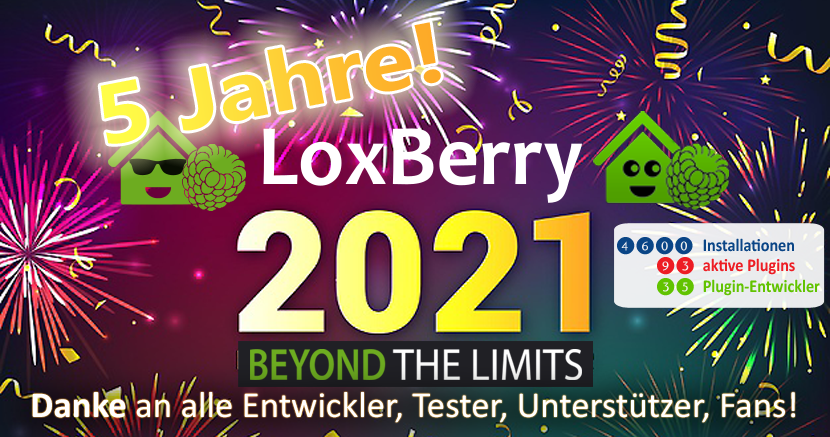
<style>
.page{position:relative;width:830px;height:437px}
.page>*{position:absolute;margin:0}
.t1{font:84.8px "SegoeUI-Bold";scale:1.13 1}
.t2{font:27px "BulletNumbersW90-SansPos";color:#0a4586}
.t3{font:18px "Calibri-Bold";color:#0a4586;scale:0.9 1}
.t4{font:27px "BulletNumbersW90-SansPos";color:#ed1d24}
.t5{font:18px "Calibri-Bold";color:#ed1d24;scale:0.9 1}
.t6{font:27px "BulletNumbersW90-SansPos";color:#61c300}
.t7{font:18px "Calibri-Bold";color:#61c300;scale:0.9 1}
.t8{font:36.8px "Calibri";color:#ffffff}
.t9{font:36.8px "Calibri-Bold";color:#ffffff}
</style>
<div class="page">
<p class="t1" style="left:100px;top:22px;width:341px;height:122px;rotate:-11deg">5 Jahre!</p>
<p class="t2" style="left:617px;top:237px;width:76px;height:18px">4600</p>
<p class="t3" style="left:703px;top:238px;width:91px;height:14px">Installationen</p>
<p class="t4" style="left:657px;top:257px;width:37px;height:18px">93</p>
<p class="t5" style="left:703px;top:258px;width:92px;height:17px">aktive Plugins</p>
<p class="t6" style="left:657px;top:278px;width:37px;height:18px">35</p>
<p class="t7" style="left:703px;top:279px;width:117px;height:17px">Plugin-Entwickler</p>
<p class="t8" style="left:32px;top:392px;width:763px;height:31px"><span class="t9">Danke </span>an alle Entwickler, Tester, Unterstützer, Fans!</p>
</div>
